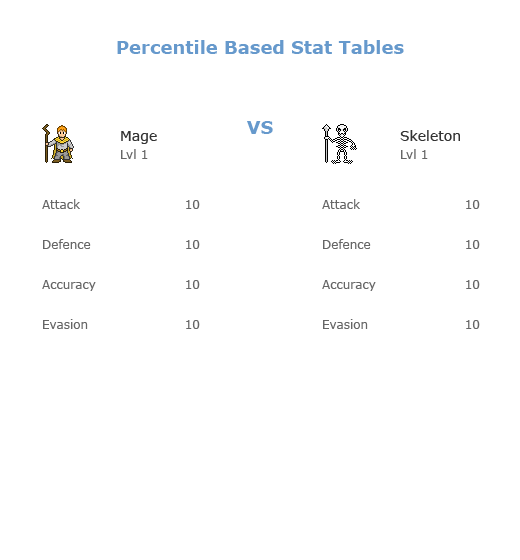
<style>
.page{position:relative;width:520px;height:560px;background:#ffffff}
.page>*{position:absolute;margin:0}
.t1{font:18px "Verdana-Bold";color:#6699cc}
.t2{font:14px "Verdana";color:#333333}
.t3{font:12px "Verdana";color:#666666}
</style>
<div class="page">
<p class="t1" style="left:117px;top:40px;width:287px;height:14px">Percentile Based Stat Tables</p>
<p class="t1" style="left:247px;top:121px;width:26px;height:13px">VS</p>
<p class="t2" style="left:121px;top:131px;width:36px;height:13px">Mage</p>
<p class="t2" style="left:400px;top:130px;width:60px;height:11px">Skeleton</p>
<p class="t3" style="left:121px;top:149px;width:27px;height:10px">Lvl 1</p>
<p class="t3" style="left:401px;top:149px;width:27px;height:10px">Lvl 1</p>
<p class="t3" style="left:42px;top:199px;width:38px;height:10px">Attack</p>
<p class="t3" style="left:186px;top:200px;width:14px;height:9px">10</p>
<p class="t3" style="left:322px;top:199px;width:38px;height:10px">Attack</p>
<p class="t3" style="left:466px;top:200px;width:14px;height:9px">10</p>
<p class="t3" style="left:43px;top:239px;width:48px;height:10px">Defence</p>
<p class="t3" style="left:186px;top:240px;width:14px;height:9px">10</p>
<p class="t3" style="left:323px;top:239px;width:48px;height:10px">Defence</p>
<p class="t3" style="left:466px;top:240px;width:14px;height:9px">10</p>
<p class="t3" style="left:42px;top:280px;width:54px;height:11px">Accuracy<br>v</p>
<p class="t3" style="left:186px;top:280px;width:14px;height:9px">10</p>
<p class="t3" style="left:322px;top:280px;width:54px;height:11px">Accuracy<br>v</p>
<p class="t3" style="left:466px;top:280px;width:14px;height:9px">10</p>
<p class="t3" style="left:43px;top:319px;width:45px;height:10px">Evasion</p>
<p class="t3" style="left:186px;top:320px;width:14px;height:9px">10</p>
<p class="t3" style="left:323px;top:319px;width:45px;height:10px">Evasion</p>
<p class="t3" style="left:466px;top:320px;width:14px;height:9px">10</p>
</div>
